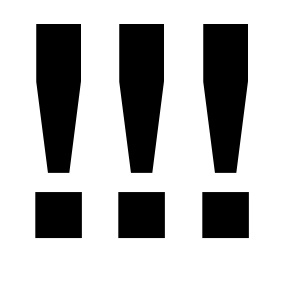
<style>
.page{position:relative;width:284px;height:283px;background:#ffffff}
.page>*{position:absolute;margin:0}
.t1{font:300px "HelveticaNeueCyr-Bold";color:#000000}
</style>
<div class="page">
<p class="t1" style="left:35px;top:24px;width:214px;height:215px">!!!</p>
</div>
